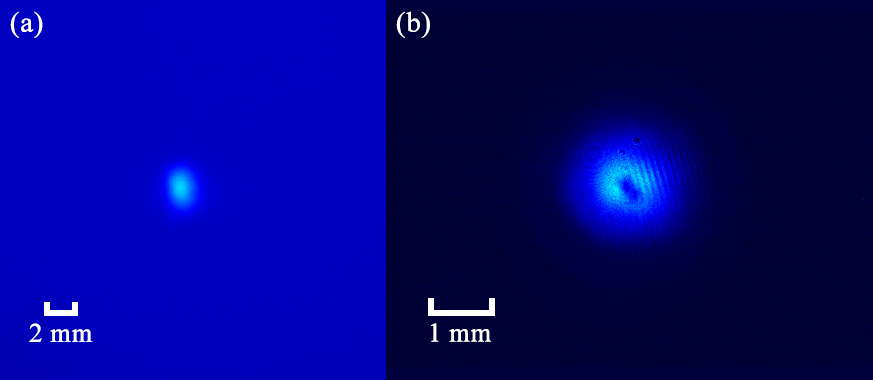
<style>
.page{position:relative;width:873px;height:380px}
.page>*{position:absolute;margin:0}
.t1{font:21.3px "TimesNewRomanPSMT";color:#ffffff;font-weight:bold}
.t2{font:26.7px "TimesNewRomanPSMT";color:#ffffff;font-weight:bold}
</style>
<div class="page">
<p class="t1" style="left:10px;top:11px;width:33px;height:27px">(a)</p>
<p class="t1" style="left:396px;top:11px;width:34px;height:27px">(b)</p>
<p class="t2" style="left:29px;top:323px;width:64px;height:19px">2 mm</p>
<p class="t2" style="left:431px;top:323px;width:60px;height:19px">1 mm</p>
</div>
